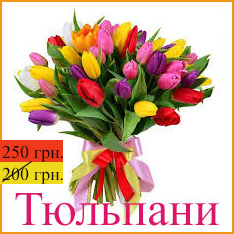
<style>
.page{position:relative;width:234px;height:234px;background:#ffffff}
.page>*{position:absolute;margin:0}
.t1{font:18px "TimesNewRomanPSMT";color:#110b0e}
</style>
<div class="page">
<p class="t1" style="left:2px;top:145px;width:61px;height:17px">250 грн.</p>
<p class="t1" style="left:2px;top:167px;width:61px;height:17px">200 грн.</p>
</div>
